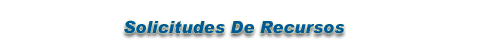
<style>
.page{position:relative;width:500px;height:47px;background:#ffffff}
.page>*{position:absolute;margin:0}
.t1{font:16.7px "Arial-BlackItalic";color:#005a97}
</style>
<div class="page">
<p class="t1" style="left:124px;top:20px;width:221px;height:14px">Solicitudes De Recursos</p>
</div>
